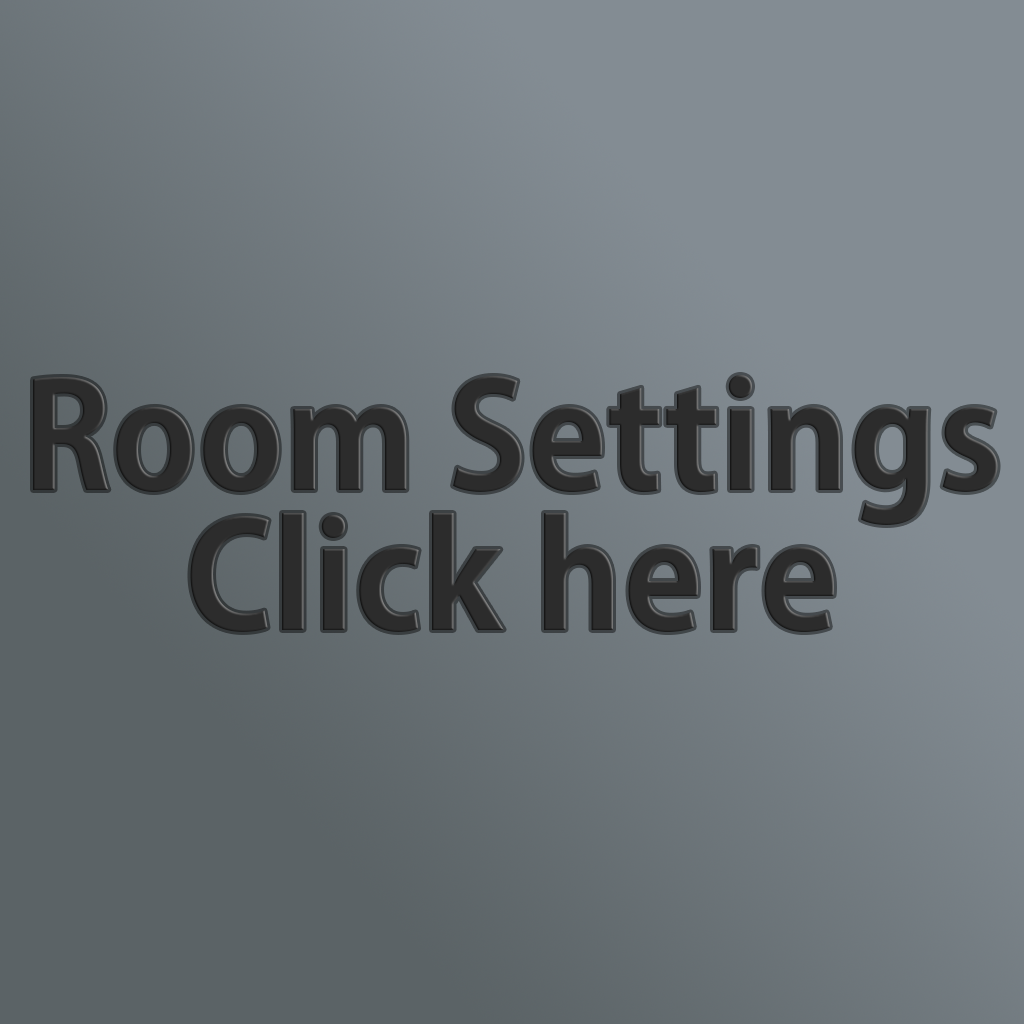
<style>
.page{position:relative;width:1024px;height:1024px}
.page>*{position:absolute;margin:0}
.t1{font:145.8px/140px "KozGoPr6N-Bold";color:#2c2c2c}
</style>
<div class="page">
<p class="t1" style="left:33px;top:375px;width:965px;height:257px;text-align:center">Room Settings<br>Click here</p>
</div>
